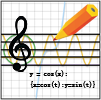
<style>
.page{position:relative;width:101px;height:100px;background:#ffffff}
.page>*{position:absolute;margin:0}
.t1{font:6.6px "SimSun";color:#000000;font-weight:bold}
</style>
<div class="page">
<p class="t1" style="left:29px;top:70px;width:66px;height:18px">y = cos(x);<br>{x=cos(t);y=sin(t)}</p>
</div>
